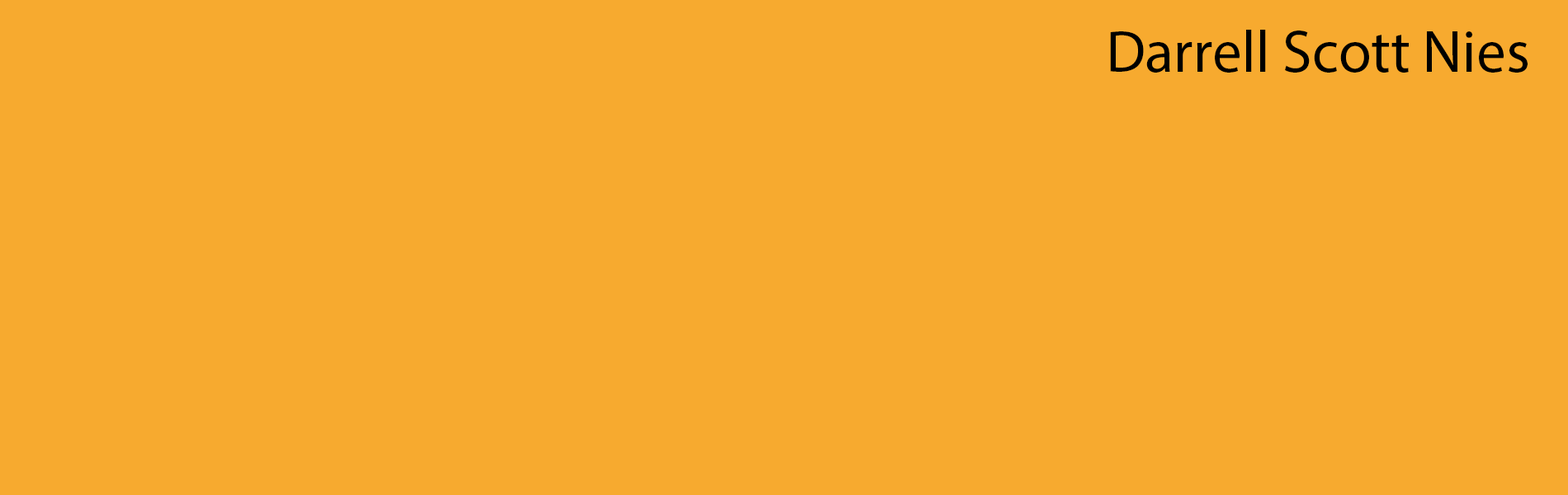
<style>
.page{position:relative;width:1568px;height:495px;background:#f7aa2f}
.page>*{position:absolute;margin:0}
.t1{font:59.4px "MyriadPro-Regular";color:#000000}
</style>
<div class="page">
<p class="t1" style="left:1110px;top:30px;width:418px;height:43px">Darrell Scott Nies</p>
</div>
